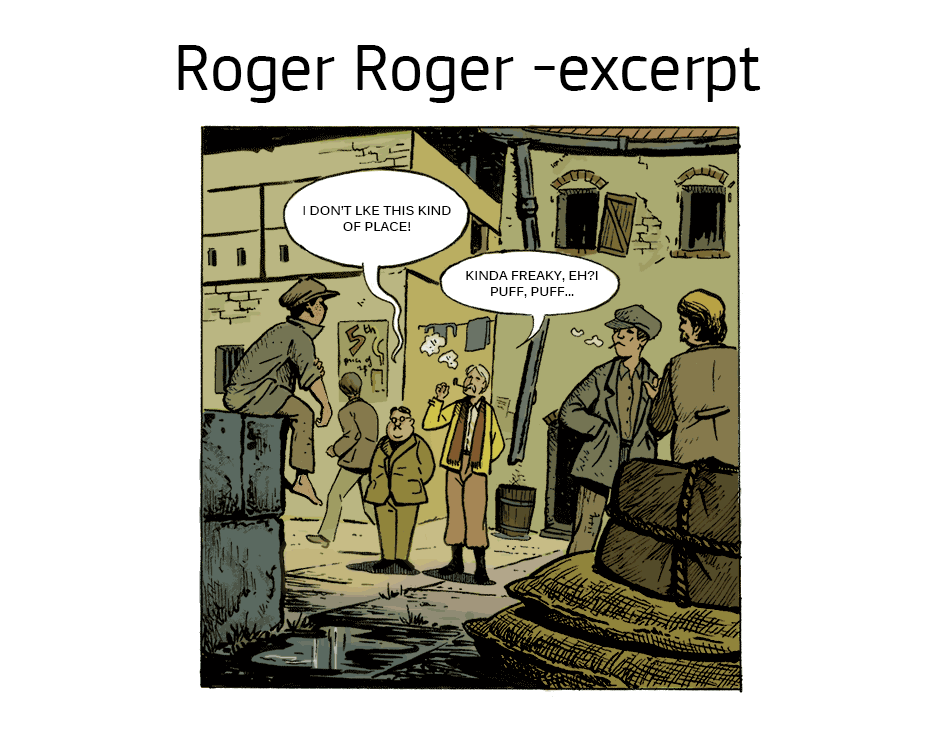
<style>
.page{position:relative;width:940px;height:750px;background:#ffffff}
.page>*{position:absolute;margin:0}
.t1{font:68px "ECSquareSansPro";color:#000000}
.t2{font:13px "Kalinga-Bold";color:#000000;text-transform:uppercase}
.t3{font:14px "ECSquareSansPro";color:#000000}
</style>
<div class="page">
<p class="t1" style="left:178px;top:45px;width:583px;height:58px">Roger Roger -excerpt</p>
<p class="t2" style="left:303px;top:206px;width:148px;height:25px;text-align:center"><span class="t3">I</span> Don’t lke this kind<br>of place!</p>
<p class="t2" style="left:466px;top:271px;width:132px;height:27px;text-align:center">Kinda Freaky, eh?i<br>puff, puff...</p>
</div>
